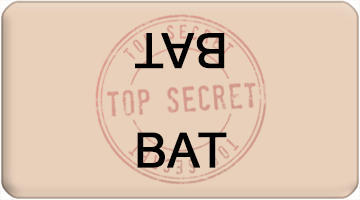
<style>
.page{position:relative;width:360px;height:200px;background:#e8d0bb}
.page>*{position:absolute;margin:0}
.t1{font:48px "ArialMT";color:#000000;font-weight:bold}
</style>
<div class="page">
<p class="t1" style="left:135px;top:33px;width:90px;height:36px;rotate:180deg">BAT</p>
<p class="t1" style="left:137px;top:132px;width:90px;height:36px">BAT</p>
</div>
